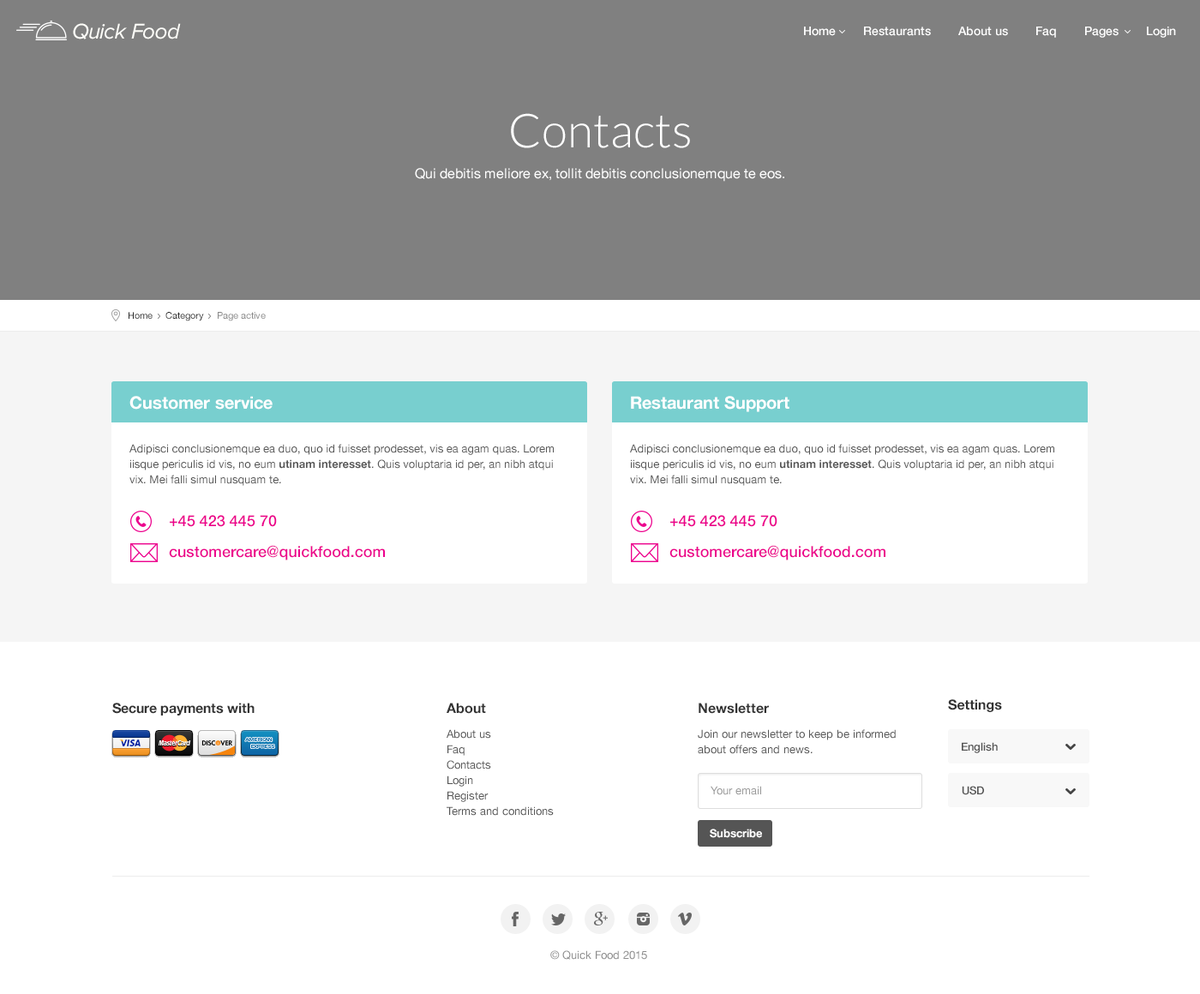
<style>
.page{position:relative;width:1200px;height:994px;background:#ffffff}
.page>*{position:absolute;margin:0}
.t1{font:22.3px "ProximaNova-RegularIt";letter-spacing:-0.025em;color:#fefef9}
.t2{font:12px "HelveticaNeue-Medium";color:#ffffff}
.t3{font:13.7px/30.8px "HelveticaNeue";color:#ffffff}
.t4{font:47.1px/41.1px "Lato-Light";color:#ffffff}
.t5{font:9.4px "HelveticaNeue";color:#252525}
.t6{font:9.4px "HelveticaNeue";color:#888888}
.t7{font:17.1px "HelveticaNeue-Bold";color:#ffffff}
.t8{font:11.1px/15.4px "HelveticaNeue";color:#555555}
.t9{font:11.1px/15.4px "HelveticaNeue-Bold";color:#555555}
.t10{font:15.4px/15.4px "HelveticaNeue-Medium";color:#ec008c}
.t11{font:13.7px "HelveticaNeue-Bold";color:#333333}
.t12{font:11.1px "HelveticaNeue-Medium";color:#555555}
.t13{font:11.1px "HelveticaNeue";color:#999999}
.t14{font:11.1px "HelveticaNeue-Bold";color:#ffffff}
.t15{font:11.1px "HelveticaNeue";color:#8c8c8c}
</style>
<div class="page">
<p class="t1" style="left:73px;top:23px;width:108px;height:16px">Quick Food</p>
<p class="t2" style="left:804px;top:27px;width:372px;height:11px">Home        Restaurants        About us        Faq        Pages        Login</p>
<p class="t3" style="left:415px;top:113px;width:369px;height:69px;text-align:center"><span class="t4">Contacts<br></span>Qui debitis meliore ex, tollit debitis conclusionemque te eos.</p>
<p class="t5" style="left:129px;top:312px;width:137px;height:9px">Home     Category     <span class="t6">Page active</span></p>
<p class="t7" style="left:129px;top:396px;width:143px;height:14px">Customer service</p>
<p class="t7" style="left:631px;top:396px;width:158px;height:16px">Restaurant Support</p>
<p class="t8" style="left:129px;top:444px;width:425px;height:42px">Adipisci conclusionemque ea duo, quo id fuisset prodesset, vis ea agam quas. Lorem iisque periculis id vis, no eum <span class="t9">utinam interesset</span>. Quis voluptaria id per, an nibh atqui vix. Mei falli simul nusquam te.</p>
<p class="t8" style="left:630px;top:444px;width:424px;height:42px">Adipisci conclusionemque ea duo, quo id fuisset prodesset, vis ea agam quas. Lorem iisque periculis id vis, no eum <span class="t9">utinam interesset</span>. Quis voluptaria id per, an nibh atqui vix. Mei falli simul nusquam te.</p>
<p class="t10" style="left:169px;top:515px;width:216px;height:45px">+45 423 445 70<br><br>customercare@quickfood.com</p>
<p class="t10" style="left:669px;top:515px;width:216px;height:45px">+45 423 445 70<br><br>customercare@quickfood.com</p>
<p class="t11" style="left:948px;top:699px;width:54px;height:13px">Settings</p>
<p class="t11" style="left:112px;top:703px;width:142px;height:13px">Secure payments with</p>
<p class="t11" style="left:446px;top:703px;width:40px;height:11px">About</p>
<p class="t11" style="left:698px;top:703px;width:71px;height:11px">Newsletter</p>
<p class="t8" style="left:446px;top:729px;width:108px;height:87px">About us<br>Faq<br>Contacts<br>Login<br>Register<br>Terms and conditions</p>
<p class="t8" style="left:698px;top:729px;width:197px;height:25px">Join our newsletter to keep be informed about offers and news.</p>
<p class="t12" style="left:961px;top:742px;width:36px;height:11px">English</p>
<p class="t13" style="left:710px;top:786px;width:51px;height:9px">Your email</p>
<p class="t12" style="left:961px;top:786px;width:23px;height:9px">USD</p>
<p class="t14" style="left:710px;top:829px;width:52px;height:9px">Subscribe</p>
<p class="t15" style="left:550px;top:950px;width:97px;height:10px">© Quick Food 2015</p>
</div>
